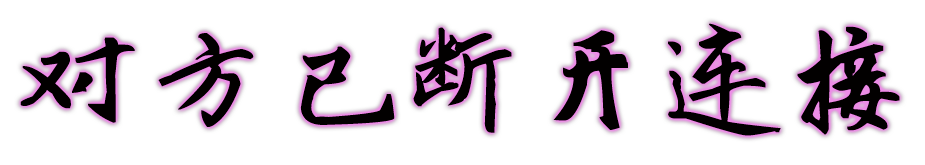
<style>
.page{position:relative;width:925px;height:165px;background:#ffffff}
.page>*{position:absolute;margin:0}
.t1{font:119.4px "SentyZHAO";color:#020000}
</style>
<div class="page">
<p class="t1" style="left:20px;top:23px;width:880px;height:113px">对方已断开连接</p>
</div>
